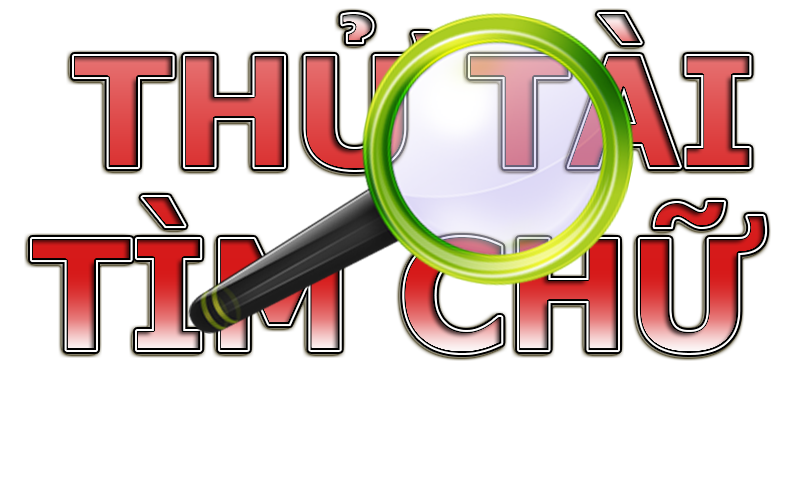
<style>
.page{position:relative;width:800px;height:500px;background:#ffffff}
.page>*{position:absolute;margin:0}
.t1{font:152.8px "Tahoma-Bold";scale:1.05 1}
</style>
<div class="page">
<p class="t1" style="left:32px;top:14px;width:734px;height:339px">THỬ TÀI <br>TÌM CHỮ</p>
</div>
